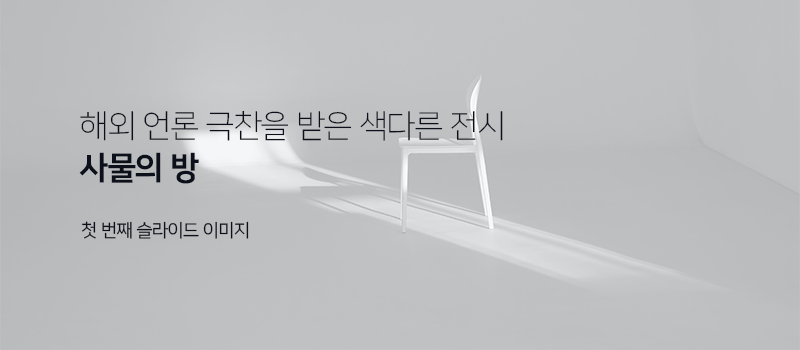
<style>
.page{position:relative;width:800px;height:350px}
.page>*{position:absolute;margin:0}
.t1{font:32px "NanumSquare_acL";color:#0c101a}
.t2{font:32px "NanumSquare_acEB";color:#0c101a}
.t3{font:18px "NanumSquare_acR";color:#0c101a}
</style>
<div class="page">
<p class="t1" style="left:80px;top:110px;width:423px;height:31px">해외 언론 극찬을 받은 색다른 전시</p>
<p class="t2" style="left:79px;top:152px;width:120px;height:32px">사물의 방</p>
<p class="t3" style="left:81px;top:221px;width:168px;height:18px">첫 번째 슬라이드 이미지</p>
</div>
